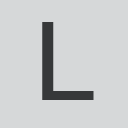
<style>
.page{position:relative;width:128px;height:128px;background:#d6d8d9}
.page>*{position:absolute;margin:0}
.t1{font:108.2px "ArialMT";color:#363839;scale:1.05 1}
</style>
<div class="page">
<p class="t1" style="left:42px;top:22px;width:52px;height:78px">L</p>
</div>
